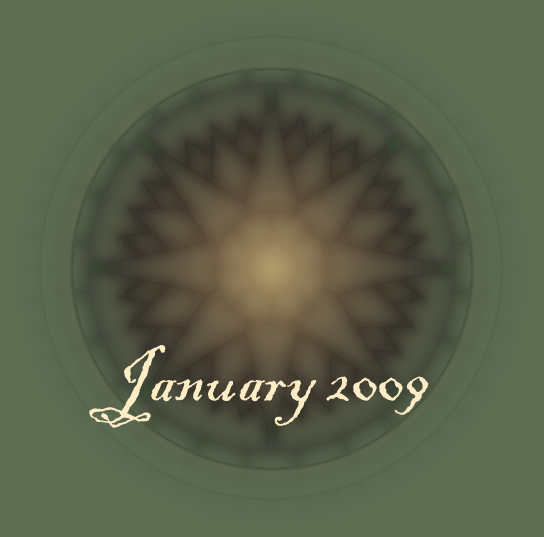
<style>
.page{position:relative;width:544px;height:537px;background:#5d6d52}
.page>*{position:absolute;margin:0}
.t1{font:72px "BlackadderITC-Regular";color:#ffedc6}
</style>
<div class="page">
<p class="t1" style="left:89px;top:345px;width:340px;height:83px">January 2009</p>
</div>
